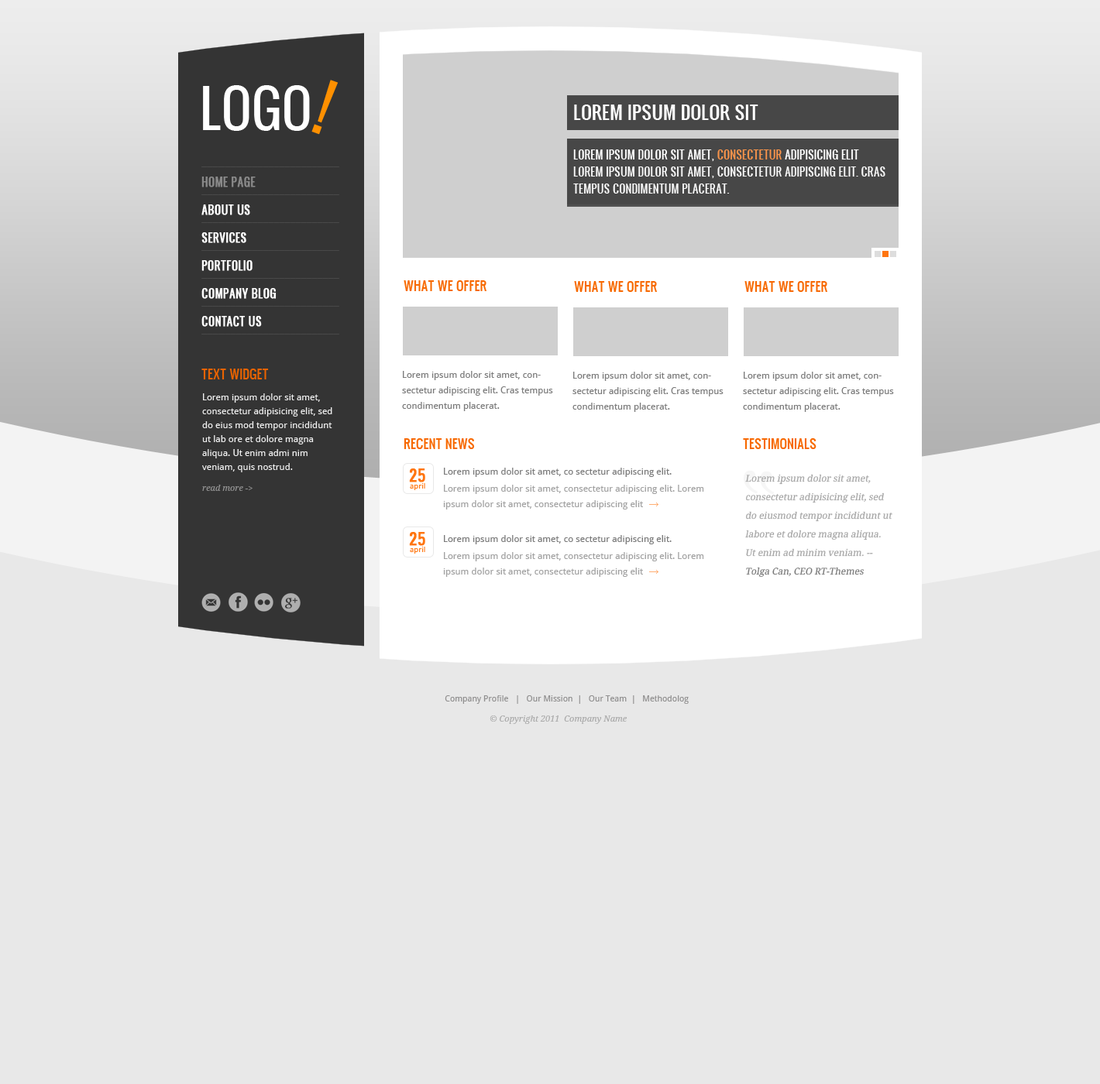
<style>
.page{position:relative;width:1100px;height:1084px;background:#e8e8e8}
.page>*{position:absolute;margin:0}
.t1{font:50.7px "Oswald";color:#ffffff}
.t2{font:62.9px "Oswald";color:#ff9000}
.t3{font:18px "Oswald";color:#ffffff;text-transform:uppercase}
.t4{font:10.8px/17px "Oswald";color:#f9f9f9;text-transform:uppercase}
.t5{font:10.8px/17px "Oswald";color:#ffffff;text-transform:uppercase}
.t6{font:10.8px/17px "Oswald";color:#f9944a;text-transform:uppercase}
.t7{font:10.8px/27.9px "Oswald";color:#ffffff;text-transform:uppercase;font-weight:bold}
.t8{font:10.8px/27.9px "Oswald";color:#898989;text-transform:uppercase;font-weight:bold}
.t9{font:12.4px "Oswald";color:#f76900;text-transform:uppercase}
.t10{font:12.4px "Oswald";color:#e96300;text-transform:uppercase}
.t11{font:9.3px/15.5px "DroidSans";color:#7c7c7c}
.t12{font:9.3px/13.9px "DroidSans";color:#eeeeee}
.t13{font:14.8px "Oswald";color:#ff750f;font-weight:bold}
.t14{font:9.3px "DroidSans";color:#7c7c7c}
.t15{font:9.3px/18.6px "DroidSerif";color:#a5a5a5;font-style:italic}
.t16{font:9.3px/18.6px "DroidSerif";color:#7a7a7a;font-style:italic}
.t17{font:8.5px "DroidSerif-Italic";color:#939393}
.t18{font:7.7px "DroidSans";color:#ff750f}
.t19{font:9.3px/15.5px "DroidSans";color:#a2a2a2}
.t20{font:10.8px "ArialMT";color:#ffae73}
.t21{font:8.5px "DroidSans";color:#919090}
.t22{font:8.5px "DroidSerif-Italic";color:#ababab}
</style>
<div class="page">
<p class="t1" style="left:203px;top:85px;width:107px;height:46px">LOGO</p>
<p class="t2" style="left:311px;top:80px;width:27px;height:55px;rotate:20deg">!</p>
<p class="t3" style="left:574px;top:105px;width:184px;height:15px">lorem ipsum dolor sit</p>
<p class="t4" style="left:573px;top:149px;width:312px;height:45px"><span class="t5">Lorem ipsum dolor sit amet,</span><span class="t6"> consectetur</span><span class="t5"> adipisicing elit <br></span>Lorem ipsum dolor sit amet, consectetur adipiscing elit. Cras tempus condimentum placerat.</p>
<p class="t7" style="left:201px;top:177px;width:75px;height:150px"><span class="t8">home page<br></span>about us<br>servıces<br>portfolio<br>company blog<br>CONTACT US</p>
<p class="t9" style="left:404px;top:280px;width:82px;height:11px">What we OFFER</p>
<p class="t9" style="left:574px;top:281px;width:83px;height:11px">What we OFFER</p>
<p class="t9" style="left:744px;top:281px;width:83px;height:11px">What we OFFER</p>
<p class="t10" style="left:201px;top:369px;width:68px;height:10px">Text wıdget</p>
<p class="t11" style="left:402px;top:371px;width:151px;height:40px">Lorem ipsum dolor sit amet, consectetur adipiscing elit. Cras tempus condimentum placerat.</p>
<p class="t11" style="left:572px;top:372px;width:151px;height:40px">Lorem ipsum dolor sit amet, consectetur adipiscing elit. Cras tempus condimentum placerat.</p>
<p class="t11" style="left:743px;top:372px;width:151px;height:40px">Lorem ipsum dolor sit amet, consectetur adipiscing elit. Cras tempus condimentum placerat.</p>
<p class="t12" style="left:202px;top:393px;width:130px;height:79px">Lorem ipsum dolor sit amet, consectetur adipisicing elit, sed do eius mod tempor incididunt ut lab ore et dolore magna aliqua. Ut enim admi nim veniam, quis nostrud.</p>
<p class="t9" style="left:404px;top:438px;width:71px;height:11px">RECENT NEWS</p>
<p class="t9" style="left:743px;top:438px;width:73px;height:11px">TESTIMONIALS</p>
<p class="t13" style="left:409px;top:469px;width:16px;height:13px">25</p>
<p class="t14" style="left:444px;top:468px;width:227px;height:9px">Lorem ipsum dolor sit amet, co sectetur adipiscing elit.</p>
<p class="t15" style="left:745px;top:474px;width:147px;height:104px">Lorem ipsum dolor sit amet, consectetur adipisicing elit, sed do eiusmod tempor incididunt ut labore et dolore magna aliqua. Ut enim ad minim veniam. -- <span class="t16">Tolga Can, CEO RT-Themes</span></p>
<p class="t17" style="left:202px;top:485px;width:50px;height:6px">read more -&gt;</p>
<p class="t18" style="left:410px;top:483px;width:15px;height:7px">april</p>
<p class="t19" style="left:443px;top:485px;width:261px;height:25px">Lorem ipsum dolor sit amet, consectetur adipiscing elit. Lorem ipsum dolor sit amet, consectetur adipiscing elit</p>
<p class="t20" style="left:649px;top:503px;width:9px;height:4px">→</p>
<p class="t13" style="left:409px;top:532px;width:16px;height:14px">25</p>
<p class="t14" style="left:444px;top:535px;width:227px;height:9px">Lorem ipsum dolor sit amet, co sectetur adipiscing elit.</p>
<p class="t18" style="left:410px;top:547px;width:15px;height:7px">april</p>
<p class="t19" style="left:443px;top:552px;width:261px;height:25px">Lorem ipsum dolor sit amet, consectetur adipiscing elit. Lorem ipsum dolor sit amet, consectetur adipiscing elit</p>
<p class="t20" style="left:649px;top:570px;width:9px;height:4px">→</p>
<p class="t21" style="left:445px;top:695px;width:244px;height:9px">Company Profile   |   Our Mission  |   Our Team  |   Methodolog</p>
<p class="t22" style="left:489px;top:716px;width:138px;height:8px">© Copyright 2011  Company Name</p>
</div>
